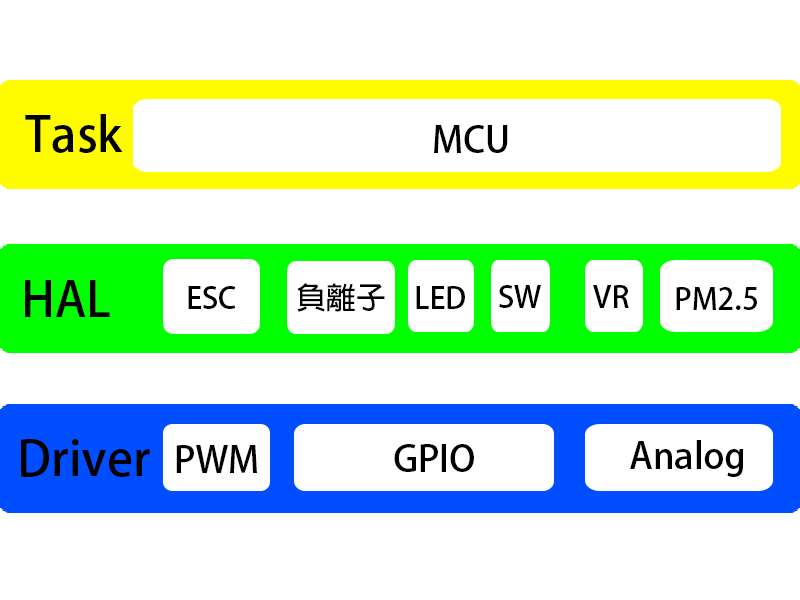
<style>
.page{position:relative;width:800px;height:600px;background:#ffffff}
.page>*{position:absolute;margin:0}
.t1{font:48px "AdobeFanHeitiStd-Bold";color:#000000}
.t2{font:36px "AdobeFanHeitiStd-Bold";color:#000000}
.t3{font:30px "AdobeFanHeitiStd-Bold";color:#000000}
</style>
<div class="page">
<p class="t1" style="left:25px;top:114px;width:98px;height:39px">Task</p>
<p class="t2" style="left:434px;top:125px;width:74px;height:28px">MCU</p>
<p class="t1" style="left:25px;top:280px;width:85px;height:37px">HAL</p>
<p class="t3" style="left:188px;top:286px;width:48px;height:23px">ESC</p>
<p class="t3" style="left:297px;top:283px;width:88px;height:29px">負離子</p>
<p class="t3" style="left:416px;top:286px;width:49px;height:23px">LED</p>
<p class="t3" style="left:499px;top:285px;width:42px;height:23px">SW</p>
<p class="t3" style="left:593px;top:285px;width:36px;height:23px">VR</p>
<p class="t3" style="left:676px;top:287px;width:81px;height:23px">PM2.5</p>
<p class="t1" style="left:21px;top:439px;width:129px;height:38px">Driver</p>
<p class="t2" style="left:176px;top:445px;width:81px;height:28px">PWM</p>
<p class="t2" style="left:394px;top:444px;width:80px;height:28px">GPIO</p>
<p class="t2" style="left:630px;top:440px;width:114px;height:37px">Analog</p>
</div>
